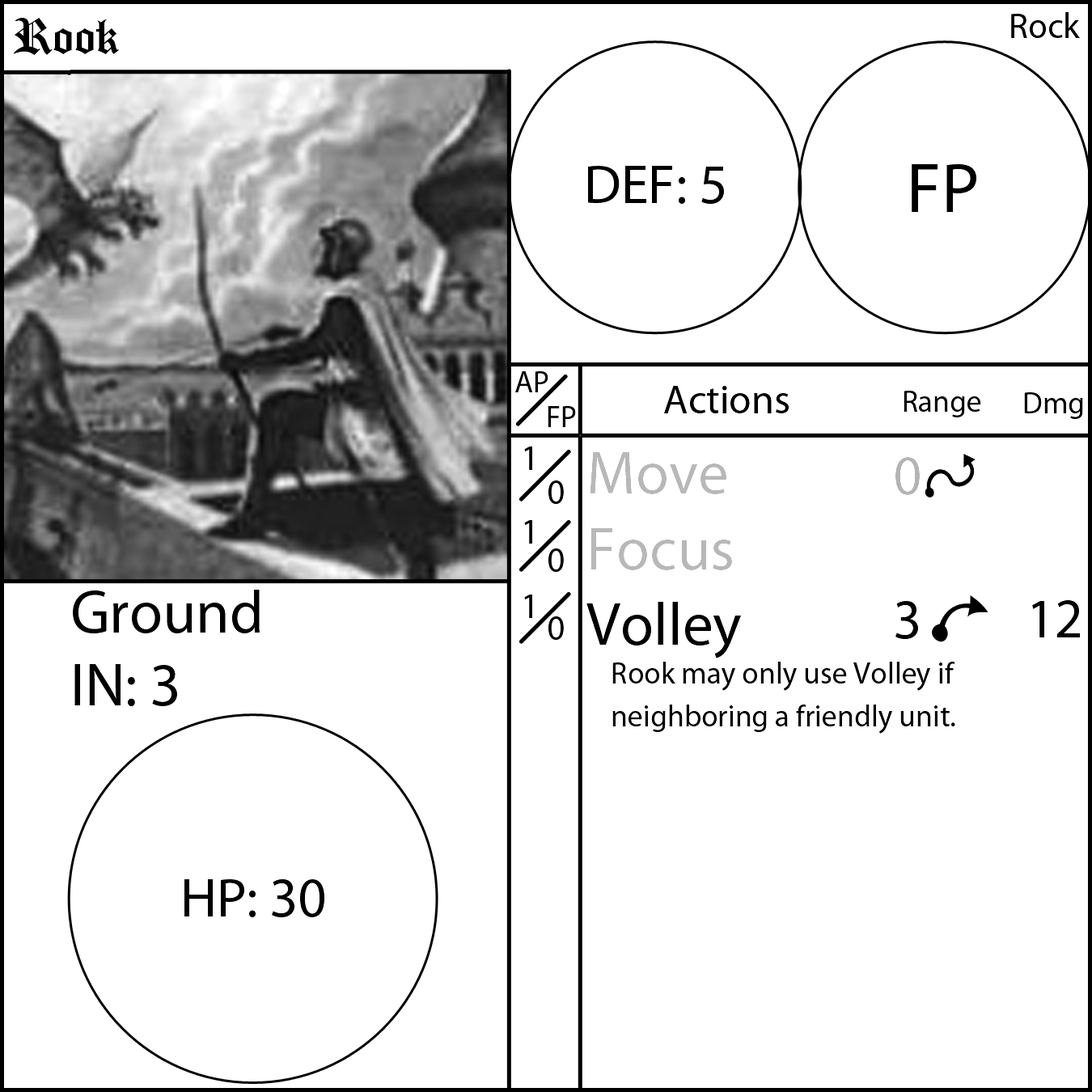
<style>
.page{position:relative;width:1092px;height:1092px;background:#ffffff}
.page>*{position:absolute;margin:0}
.t1{font:55.6px "OldLondon";color:#000000}
.t2{font:35.4px "MyriadPro-Regular";color:#000000}
.t3{font:55.6px "MyriadPro-Regular";color:#000000}
.t4{font:70.8px "MyriadPro-Regular";color:#000000}
.t5{font:30.3px "MyriadPro-Regular";color:#000000}
.t6{font:40.4px "MyriadPro-Regular";color:#000000}
.t7{font:60.7px "MyriadPro-Regular";color:#a7a7a7}
.t8{font:60.7px "MyriadPro-Regular";color:#000000}
.t9{font:55.6px "MyriadPro-Regular";color:#a4a4a4}
</style>
<div class="page">
<p class="t1" style="left:13px;top:18px;width:106px;height:37px">Rook</p>
<p class="t2" style="left:1011px;top:12px;width:69px;height:26px">Rock</p>
<p class="t3" style="left:588px;top:166px;width:136px;height:38px">DEF: 5</p>
<p class="t4" style="left:912px;top:164px;width:64px;height:48px">FP</p>
<p class="t5" style="left:515px;top:371px;width:33px;height:21px">AP</p>
<p class="t6" style="left:664px;top:386px;width:125px;height:27px">Actions</p>
<p class="t5" style="left:904px;top:391px;width:77px;height:26px">Range</p>
<p class="t5" style="left:1024px;top:392px;width:59px;height:27px">Dmg</p>
<p class="t5" style="left:548px;top:406px;width:28px;height:21px">FP</p>
<p class="t2" style="left:524px;top:447px;width:8px;height:171px">1<br><br>1<br><br>1</p>
<p class="t5" style="left:586px;top:452px;width:369px;height:282px"><span class="t7">Move<br>Focus<br></span><span class="t8">Volley<br> </span>Rook may only use Volley if <br> neighboring a friendly unit.</p>
<p class="t9" style="left:895px;top:457px;width:25px;height:182px;text-align:center">0<br><span class="t3"><br>3</span></p>
<p class="t2" style="left:548px;top:480px;width:16px;height:160px">0<br><br>0<br><br>0</p>
<p class="t8" style="left:73px;top:590px;width:187px;height:116px">Ground<br>IN: 3</p>
<p class="t3" style="left:1032px;top:600px;width:48px;height:37px">12</p>
<p class="t3" style="left:184px;top:879px;width:140px;height:38px">HP: 30</p>
</div>
